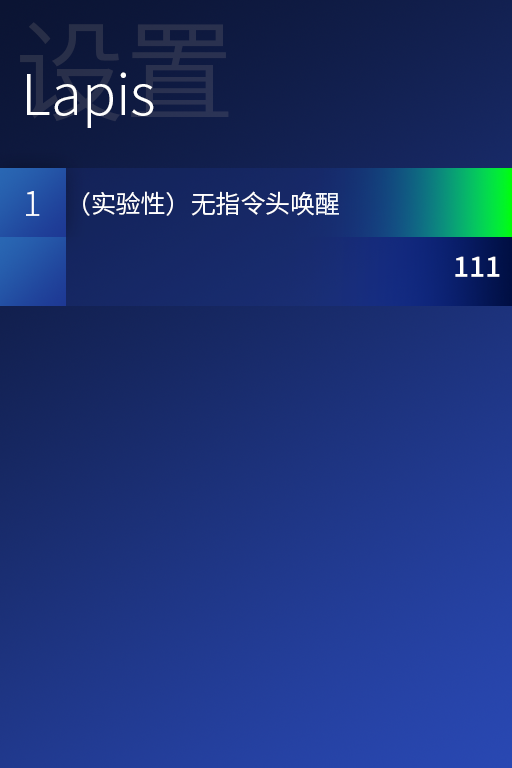
<style>
.page{position:relative;width:512px;height:768px}
.page>*{position:absolute;margin:0}
.t1{font:56.3px "SourceHanSansCN-Light";color:#ffffff}
.t2{font:34.6px "SourceHanSansCN-Light";color:#ffffff}
.t3{font:24.9px "SourceHanSansCN-Normal";color:#ffffff}
.t4{font:28px "SourceHanSansCN-Medium";color:#ffffff}
</style>
<div class="page">
<p class="t1" style="left:27px;top:72px;width:127px;height:56px">Lapis</p>
<p class="t2" style="left:26px;top:191px;width:14px;height:25px">1</p>
<p class="t3" style="left:83px;top:191px;width:256px;height:25px">（实验性）无指令头唤醒</p>
<p class="t4" style="left:455px;top:256px;width:45px;height:21px">111</p>
</div>
